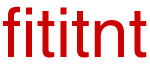
<style>
.page{position:relative;width:150px;height:64px;background:#ffffff}
.page>*{position:absolute;margin:0}
.t1{font:69px "Helvetica";color:#cc0000}
</style>
<div class="page">
<p class="t1" style="left:3px;top:6px;width:144px;height:52px">fititnt</p>
</div>
